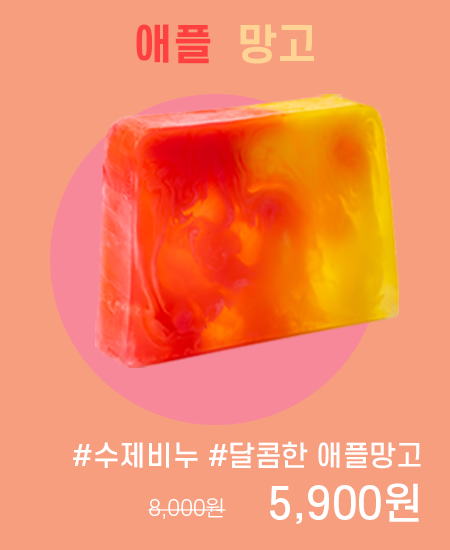
<style>
.page{position:relative;width:450px;height:550px;background:#f79e7f}
.page>*{position:absolute;margin:0}
.t1{font:41.7px "S-CoreDream-6Bold";color:#fe4040}
.t2{font:41.7px "S-CoreDream-6Bold";color:#ffd394}
.t3{font:27.8px "S-CoreDream-5Medium";color:#ffffff}
.t4{font:41.7px "S-CoreDream-5Medium";color:#ffffff}
.t5{font:20.8px "S-CoreDream-3Light";color:#ffffff}
</style>
<div class="page">
<p class="t1" style="left:136px;top:24px;width:178px;height:40px">애플  <span class="t2">망고</span></p>
<p class="t3" style="left:73px;top:441px;width:348px;height:28px">#수제비누 #달콤한 애플망고</p>
<p class="t4" style="left:270px;top:483px;width:149px;height:41px">5,900원</p>
<p class="t5" style="left:148px;top:498px;width:78px;height:21px">8,000원</p>
</div>
